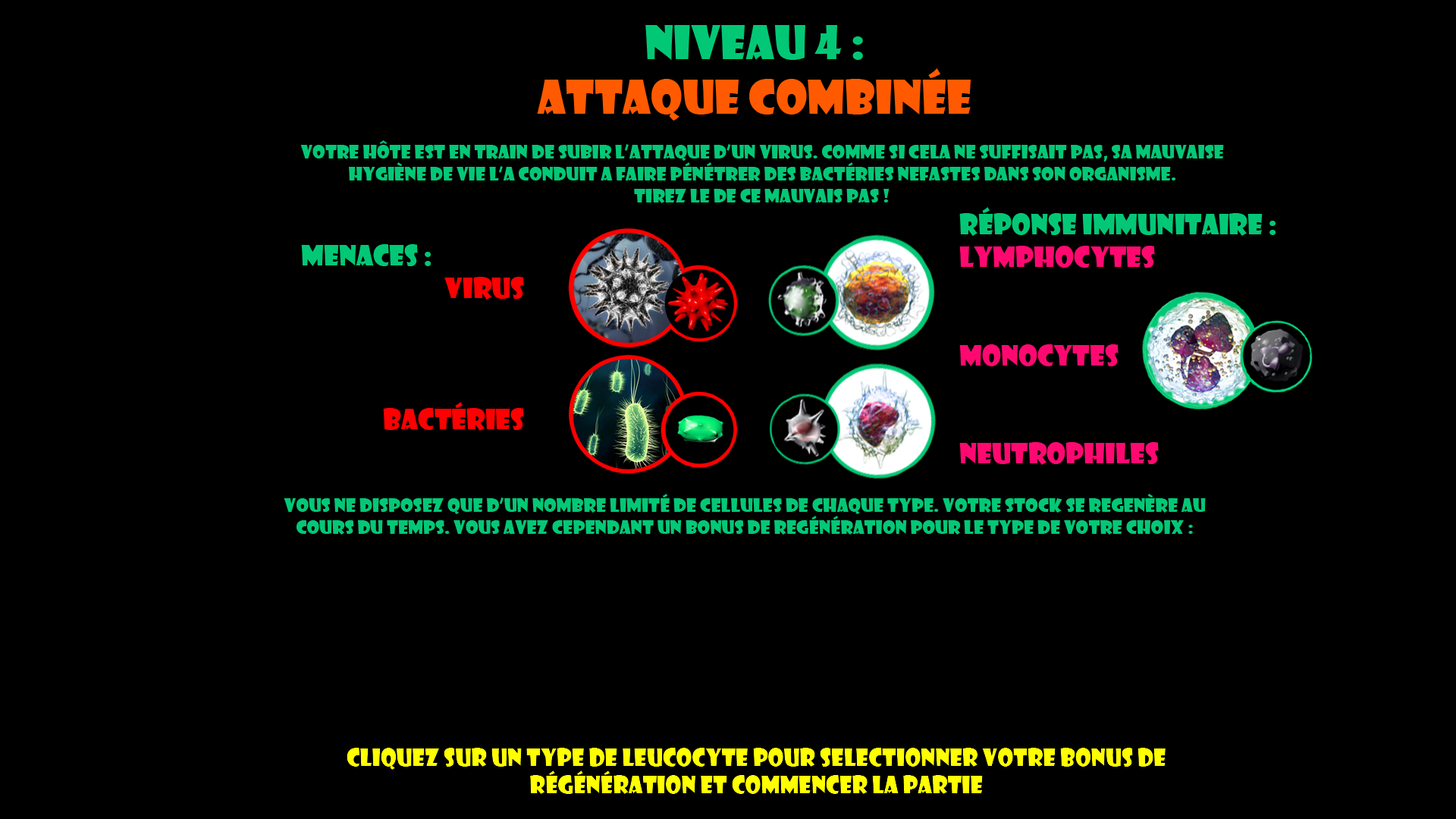
<style>
.page{position:relative;width:1456px;height:819px;background:#000000}
.page>*{position:absolute;margin:0}
.t1{font:45.5px "ShowcardGothic-Reg";color:#ff5a00}
.t2{font:45.5px "ShowcardGothic-Reg";color:#02c876}
.t3{font:18.2px "ShowcardGothic-Reg";color:#02c876}
.t4{font:27.3px "ShowcardGothic-Reg";color:#ff0971}
.t5{font:27.3px "ShowcardGothic-Reg";color:#02c876}
.t6{font:27.3px "ShowcardGothic-Reg";color:#ff0000}
</style>
<div class="page">
<p class="t1" style="left:537px;top:25px;width:434px;height:96px;text-align:center"><span class="t2">Niveau 4 : <br></span>attaque combinée</p>
<p class="t3" style="left:300px;top:140px;width:924px;height:63px;text-align:center">Votre hôte est en train de subir l’attaque d’un virus. comme si cela ne suffisait pas, sa mauvaise hygiène de vie l’a conduit a faire pénétrer des bactéries nefastes dans son organisme.<br>TIrez le de ce mauvais pas !</p>
<p class="t4" style="left:959px;top:207px;width:317px;height:258px"><span class="t5">Réponse immunitaire :<br></span>LYMPHOCYTES<br><br><br>Monocytes<br><br><br>Neutrophiles</p>
<p class="t6" style="left:301px;top:244px;width:223px;height:187px"><span class="t5">                                      Menaces :          <br></span>virus<br><br><br><br>Bactéries</p>
<p class="t3" style="left:284px;top:494px;width:922px;height:41px;text-align:center">VOUS NE DISPOSEZ QUE D’un nombre limité de cellules de chaque type. Votre stock se regenère au cours du temps. Vous avez cependant un bonus de regénération pour le type de votre choix :</p>
</div>
